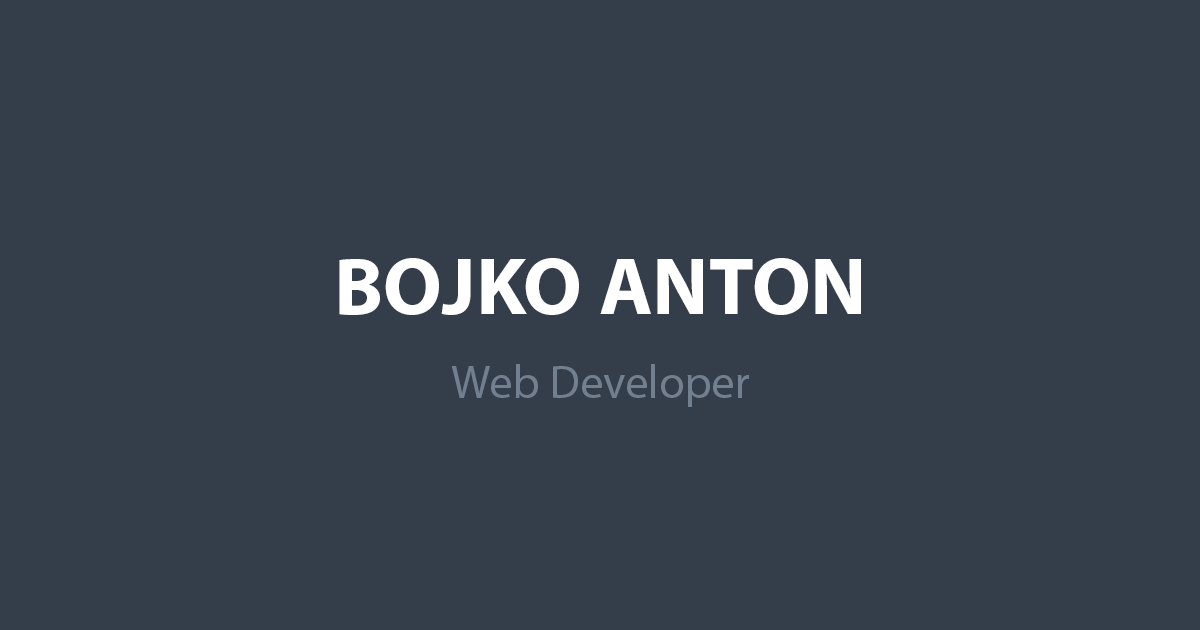
<style>
.page{position:relative;width:1200px;height:630px;background:#343e4a}
.page>*{position:absolute;margin:0}
.t1{font:82px "MyriadPro-Bold";color:#ffffff}
.t2{font:46.5px "MyriadPro-Regular";color:#727f8f}
</style>
<div class="page">
<p class="t1" style="left:339px;top:258px;width:522px;height:57px">BOJKO ANTON</p>
<p class="t2" style="left:451px;top:364px;width:298px;height:43px">Web Developer</p>
</div>
